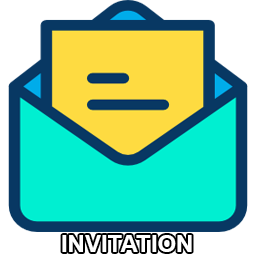
<style>
.page{position:relative;width:256px;height:256px;background:#00efd1}
.page>*{position:absolute;margin:0}
.t1{font:24px "Arial-BoldMT";color:#ffffff}
</style>
<div class="page">
<p class="t1" style="left:62px;top:235px;width:130px;height:17px">INVITATION</p>
</div>
